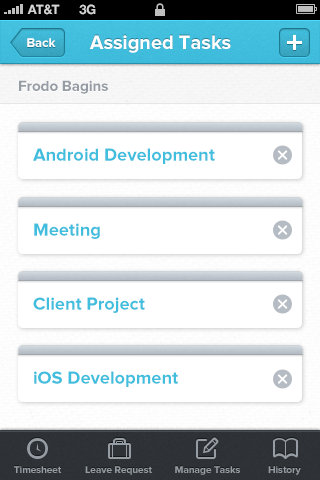
<style>
.page{position:relative;width:320px;height:480px;background:#ffffff}
.page>*{position:absolute;margin:0}
.t1{font:13px "HelveticaNeue-Bold";color:#d4d4d4;text-transform:uppercase}
.t2{font:13px "ProximaNova-Bold";color:#ffffff}
.t3{font:20px "ProximaNova-Bold";color:#ffffff}
.t4{font:15px "ProximaNova-Bold";color:#959ca3}
.t5{font:18px "ProximaNova-Bold";color:#41bedd}
.t6{font:10px "ProximaNova-Bold";color:#959ca3}
</style>
<div class="page">
<p class="t1" style="left:27px;top:4px;width:33px;height:11px">AT&amp;t</p>
<p class="t1" style="left:79px;top:4px;width:17px;height:11px">3G</p>
<p class="t2" style="left:27px;top:38px;width:29px;height:9px">Back</p>
<p class="t3" style="left:89px;top:35px;width:142px;height:18px">Assigned Tasks</p>
<p class="t4" style="left:19px;top:80px;width:89px;height:14px">Frodo Bagins</p>
<p class="t5" style="left:33px;top:148px;width:182px;height:16px">Android Development</p>
<p class="t5" style="left:34px;top:223px;width:66px;height:16px">Meeting</p>
<p class="t5" style="left:33px;top:297px;width:112px;height:16px">Client Project</p>
<p class="t5" style="left:34px;top:371px;width:144px;height:16px">iOS Development</p>
<p class="t6" style="left:14px;top:466px;width:48px;height:7px">Timesheet</p>
<p class="t6" style="left:85px;top:466px;width:67px;height:9px">Leave Request</p>
<p class="t6" style="left:175px;top:466px;width:65px;height:9px">Manage Tasks</p>
<p class="t6" style="left:268px;top:466px;width:33px;height:9px">History</p>
</div>
